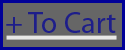
<style>
.page{position:relative;width:125px;height:50px;background:#666666}
.page>*{position:absolute;margin:0}
.t1{font:30px "MyriadPro-Regular";color:#1e1e8a}
</style>
<div class="page">
<p class="t1" style="left:6px;top:12px;width:110px;height:21px">+ To Cart</p>
</div>
